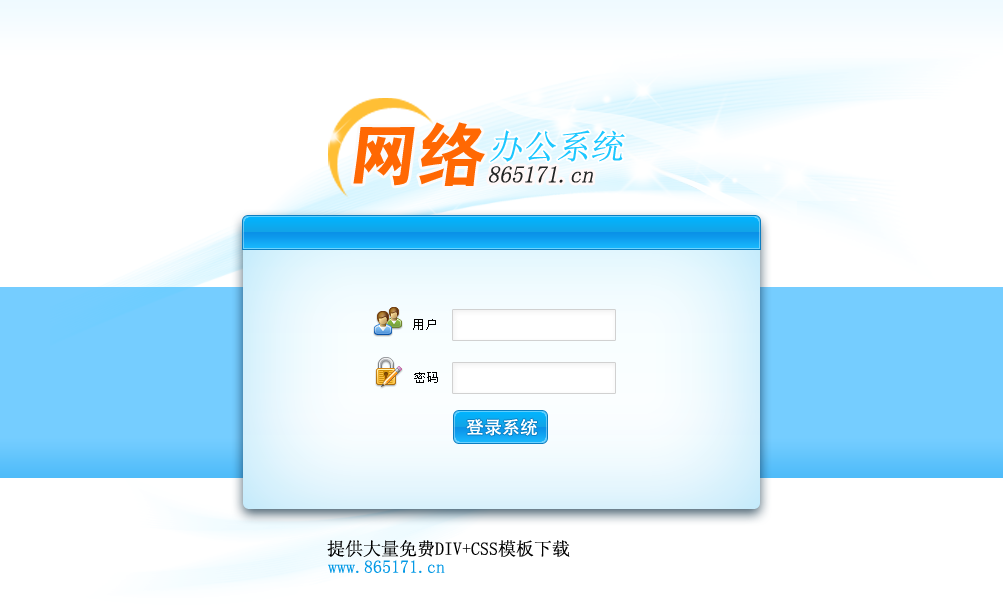
<style>
.page{position:relative;width:1003px;height:613px;background:#ffffff}
.page>*{position:absolute;margin:0}
.t1{font:68.5px "HeitiCSEG";color:#ff6803}
.t2{font:34px "SimSun";color:#1cc7ff}
.t3{font:24px "SimSun";color:#212424}
.t4{font:12px "SimSun";letter-spacing:0.075em;color:#010101}
.t5{font:18px "AdobeHeitiStd-Regular";color:#ffffff}
.t6{font:18px "SimSun";color:#000000}
.t7{font:18px "SimSun";color:#0499e5}
</style>
<div class="page">
<p class="t1" style="left:353px;top:122px;width:132px;height:64px">网络</p>
<p class="t2" style="left:490px;top:130px;width:135px;height:32px">办公系统</p>
<p class="t3" style="left:489px;top:166px;width:104px;height:17px">865171.cn</p>
<p class="t4" style="left:413px;top:319px;width:23px;height:11px">用户</p>
<p class="t4" style="left:414px;top:372px;width:24px;height:11px">密码</p>
<p class="t5" style="left:466px;top:418px;width:72px;height:18px">登录系统</p>
<p class="t6" style="left:327px;top:540px;width:243px;height:17px">提供大量免费DIV+CSS模板下载</p>
<p class="t7" style="left:328px;top:560px;width:117px;height:13px">www.865171.cn</p>
</div>
